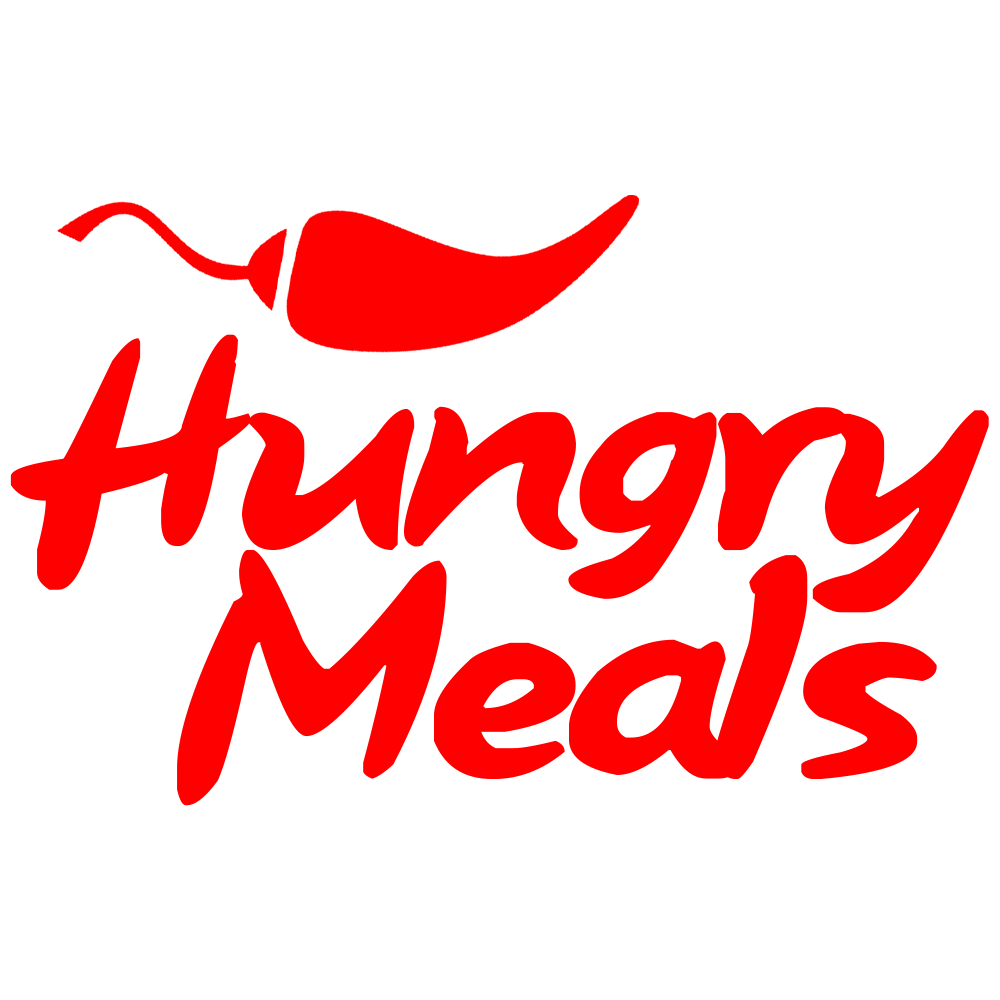
<style>
.page{position:relative;width:1000px;height:1000px;background:#ffffff}
.page>*{position:absolute;margin:0}
.t1{font:313.9px "PizzaHutFont";color:#ff0000}
</style>
<div class="page">
<p class="t1" style="left:10px;top:334px;width:979px;height:279px">Hungry</p>
<p class="t1" style="left:177px;top:549px;width:760px;height:257px">Meals</p>
</div>
